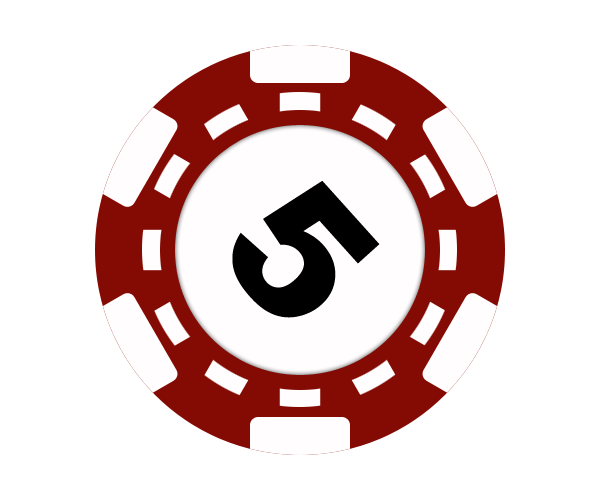
<style>
.page{position:relative;width:600px;height:500px;background:#ffffff}
.page>*{position:absolute;margin:0}
.t1{font:180px "Arial-Black";color:#000000}
</style>
<div class="page">
<p class="t1" style="left:232px;top:181px;width:148px;height:137px;rotate:48deg">5</p>
</div>
